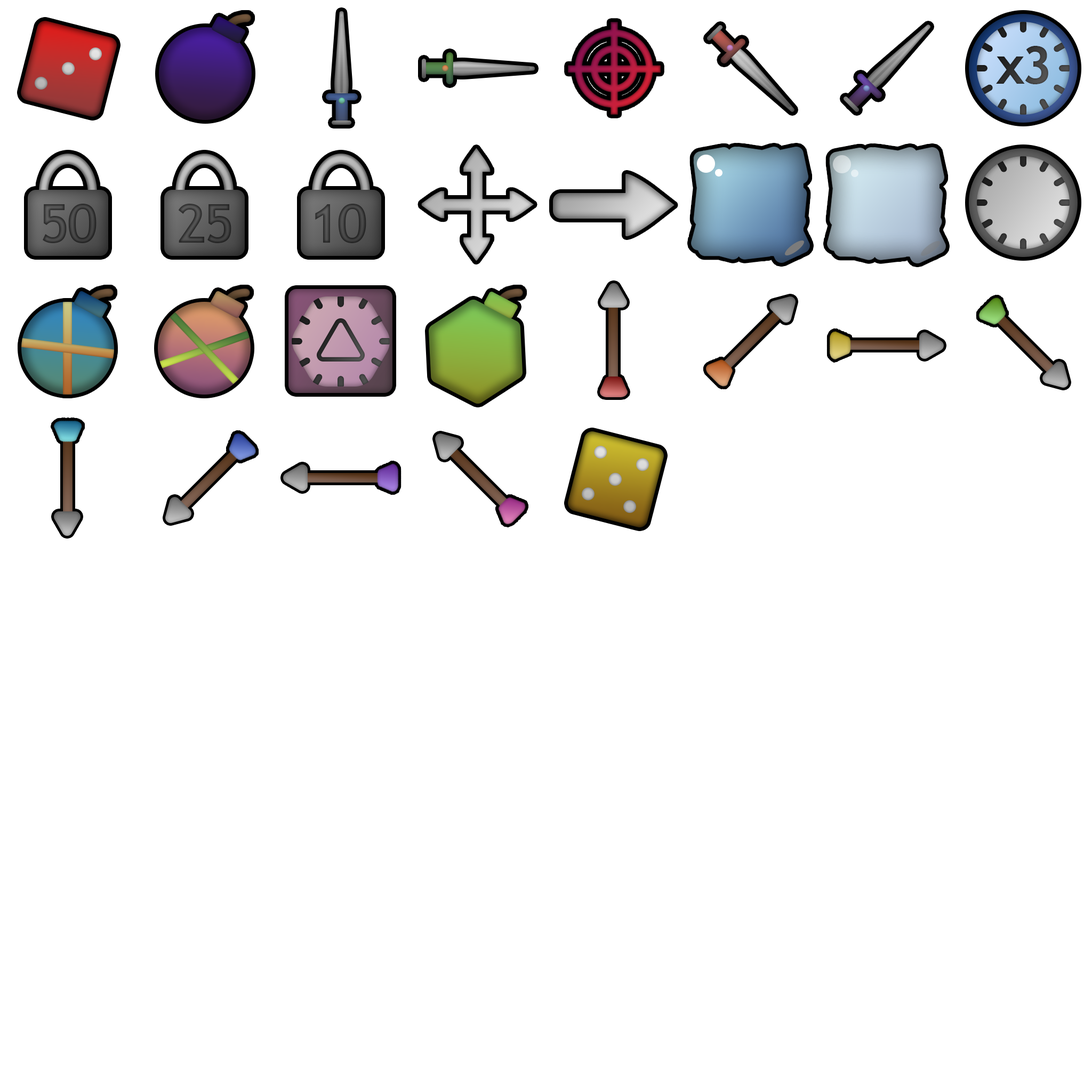
<style>
.page{position:relative;width:1092px;height:1092px;background:#ffffff}
.page>*{position:absolute;margin:0}
.t1{font:89.7px "TrebuchetMS-Bold";letter-spacing:-0.06em;color:#252525}
.t2{font:92px "TrebuchetMS-Bold";letter-spacing:-0.06em;color:#3d3d3d}
.t3{font:92px "TrebuchetMS-Bold";letter-spacing:-0.06em;color:#3c3c3c}
</style>
<div class="page">
<p class="t1" style="left:996px;top:46px;width:52px;height:38px">x3</p>
<p class="t2" style="left:43px;top:204px;width:54px;height:39px">50</p>
<p class="t3" style="left:178px;top:204px;width:53px;height:39px">25</p>
<p class="t3" style="left:315px;top:204px;width:51px;height:39px">10</p>
</div>
